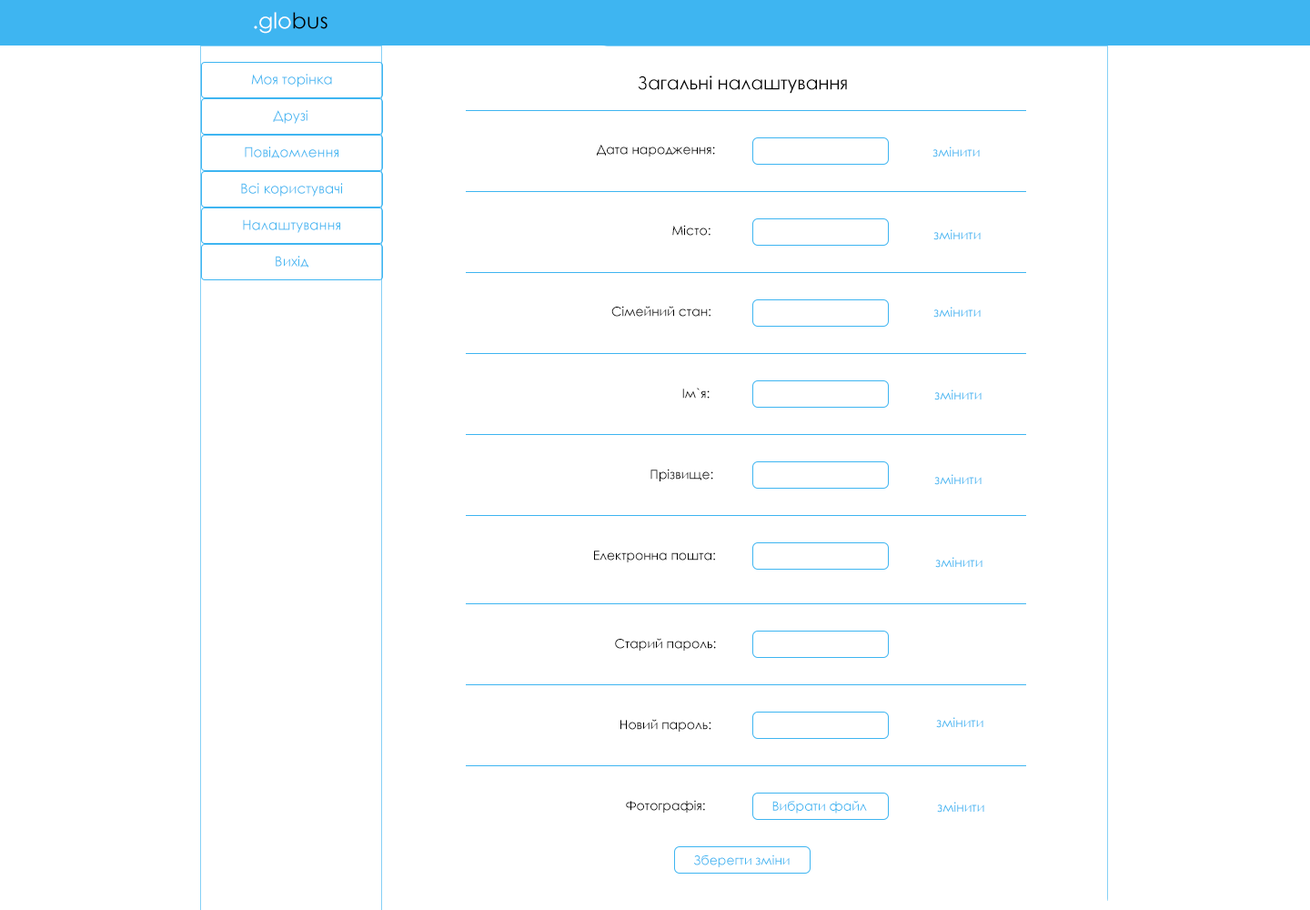
<style>
.page{position:relative;width:1310px;height:910px;background:#ffffff}
.page>*{position:absolute;margin:0}
.t1{font:21.8px "CenturyGothic";color:#ffffff}
.t2{font:21.8px "CenturyGothic";color:#000000}
.t3{font:13.6px "CenturyGothic";color:#3eb5f1}
.t4{font:18.2px "CenturyGothic";color:#000000}
.t5{font:12.7px "CenturyGothic";color:#000000}
.t6{font:12.7px "CenturyGothic";color:#3eb5f1}
</style>
<div class="page">
<p class="t1" style="left:254px;top:12px;width:74px;height:22px">.glo<span class="t2">bus</span></p>
<p class="t3" style="left:251px;top:74px;width:81px;height:13px">Моя торінка</p>
<p class="t4" style="left:638px;top:76px;width:209px;height:18px">Загальні налаштування</p>
<p class="t3" style="left:273px;top:110px;width:35px;height:14px">Друзі</p>
<p class="t3" style="left:245px;top:147px;width:94px;height:11px">Повідомлення</p>
<p class="t5" style="left:597px;top:145px;width:118px;height:12px">Дата народження:</p>
<p class="t6" style="left:933px;top:147px;width:47px;height:10px">змінити</p>
<p class="t3" style="left:241px;top:183px;width:102px;height:14px">Всі користувачі</p>
<p class="t3" style="left:243px;top:219px;width:97px;height:14px">Налаштування</p>
<p class="t5" style="left:672px;top:225px;width:39px;height:11px">Місто:</p>
<p class="t6" style="left:934px;top:229px;width:47px;height:11px">змінити</p>
<p class="t3" style="left:276px;top:256px;width:32px;height:12px">Вихід</p>
<p class="t5" style="left:612px;top:306px;width:99px;height:11px">Сімейний стан:</p>
<p class="t6" style="left:934px;top:307px;width:47px;height:11px">змінити</p>
<p class="t5" style="left:682px;top:388px;width:28px;height:11px">Ім`я:</p>
<p class="t6" style="left:935px;top:389px;width:47px;height:11px">змінити</p>
<p class="t5" style="left:651px;top:469px;width:62px;height:12px">Прізвище:</p>
<p class="t6" style="left:935px;top:474px;width:47px;height:11px">змінити</p>
<p class="t5" style="left:594px;top:551px;width:121px;height:11px">Електронна пошта:</p>
<p class="t6" style="left:935px;top:557px;width:48px;height:11px">змінити</p>
<p class="t5" style="left:615px;top:638px;width:101px;height:13px">Старий пароль:</p>
<p class="t5" style="left:621px;top:719px;width:91px;height:13px">Новий пароль:</p>
<p class="t6" style="left:936px;top:717px;width:48px;height:11px">змінити</p>
<p class="t5" style="left:626px;top:800px;width:79px;height:13px">Фотографія:</p>
<p class="t6" style="left:773px;top:801px;width:94px;height:13px">Вибрати файл</p>
<p class="t6" style="left:937px;top:802px;width:48px;height:11px">змінити</p>
<p class="t6" style="left:694px;top:854px;width:96px;height:13px">Зберегти зміни</p>
</div>
